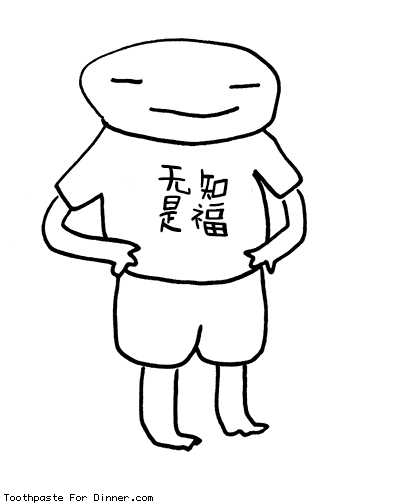
<style>
.page{position:relative;width:400px;height:504px;background:#ffffff}
.page>*{position:absolute;margin:0}
.t1{font:42px/38px "FZMWJW--GB1-0";color:#000000}
</style>
<div class="page">
<p class="t1" style="left:158px;top:164px;width:70px;height:73px">无知<br>是福</p>
</div>
